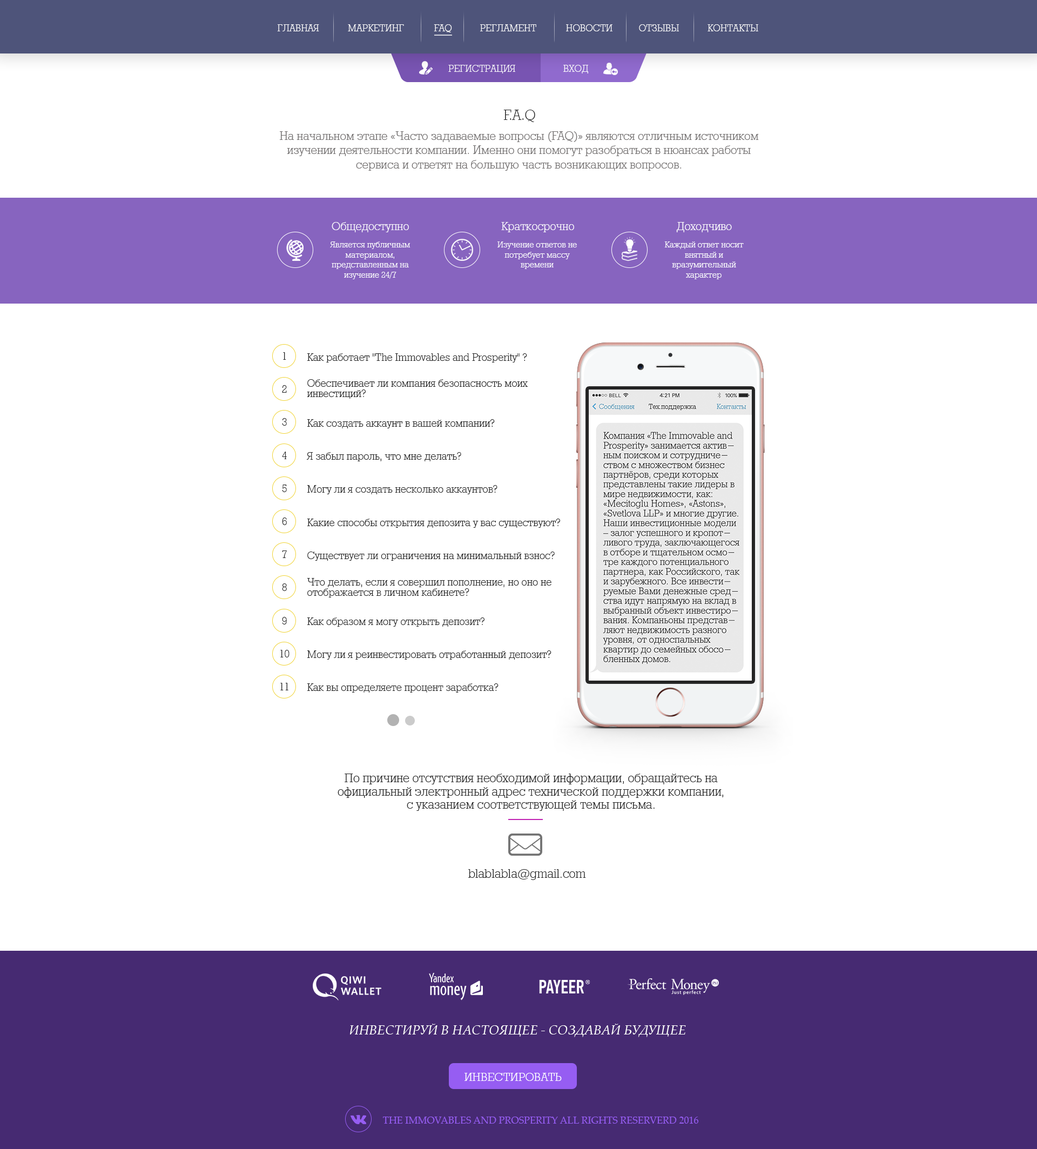
<style>
.page{position:relative;width:1037px;height:1149px;background:#ffffff}
.page>*{position:absolute;margin:0}
.t1{font:10.8px "Rodeo95";color:#ffffff;text-transform:uppercase}
.t2{font:16.2px "Rodeo95";color:#282828}
.t3{font:13.5px/14.3px "Rodeo95";color:#726f6f}
.t4{font:13px "Rodeo95";color:#ffffff}
.t5{font:9.7px/10px "Rodeo95";color:#ffffff}
.t6{font:11.9px "Rodeo95";color:#252525}
.t7{font:14px/13.2px "Rodeo95";color:#252525}
.t8{font:14px "Rodeo95";color:#252525}
.t9{font:13px "PalatinoLinotype-Italic";color:#ffffff;text-transform:uppercase}
.t10{font:13px "Rodeo95";color:#ffffff;text-transform:uppercase}
.t11{font:9.7px "PalatinoLinotype-Roman";color:#965df2;text-transform:uppercase}
</style>
<div class="page">
<p class="t1" style="left:277px;top:24px;width:42px;height:7px">Главная</p>
<p class="t1" style="left:348px;top:24px;width:56px;height:7px">МАРКЕТИНГ</p>
<p class="t1" style="left:434px;top:24px;width:18px;height:8px">FAQ</p>
<p class="t1" style="left:480px;top:24px;width:57px;height:7px">РЕГЛАМЕНТ</p>
<p class="t1" style="left:566px;top:24px;width:47px;height:7px">НОВОСТИ</p>
<p class="t1" style="left:639px;top:24px;width:40px;height:7px">Отзывы</p>
<p class="t1" style="left:708px;top:24px;width:51px;height:7px">КОНТАКТЫ</p>
<p class="t1" style="left:448px;top:65px;width:68px;height:8px">РЕГИСТРАЦИЯ</p>
<p class="t1" style="left:564px;top:65px;width:24px;height:8px">ВХОД</p>
<p class="t2" style="left:504px;top:110px;width:31px;height:12px">F.A.Q</p>
<p class="t3" style="left:280px;top:131px;width:479px;height:40px;text-align:center">На начальном этапе «Часто задаваемые вопросы (FAQ)» являются отличным источником изучении деятельности компании. Именно они помогут разобраться в нюансах работы сервиса и ответят на большую часть возникающих вопросов.</p>
<p class="t4" style="left:332px;top:222px;width:77px;height:10px">Общедоступно</p>
<p class="t4" style="left:501px;top:222px;width:73px;height:10px">Краткосрочно</p>
<p class="t4" style="left:677px;top:222px;width:55px;height:10px">Доходчиво</p>
<p class="t5" style="left:330px;top:242px;width:81px;height:37px;text-align:center">Является публичным материалом, <br>представленным на изучение 24/7</p>
<p class="t5" style="left:498px;top:242px;width:79px;height:27px;text-align:center">Изучение ответов не потребует массу <br>времени</p>
<p class="t5" style="left:665px;top:242px;width:79px;height:37px;text-align:center">Каждый ответ носит внятный и <br>вразумительный <br>характер</p>
<p class="t6" style="left:283px;top:352px;width:3px;height:8px">1</p>
<p class="t6" style="left:307px;top:353px;width:220px;height:10px">Как работает "The Immovables and Prosperity" ?</p>
<p class="t6" style="left:282px;top:385px;width:5px;height:8px">2</p>
<p class="t6" style="left:307px;top:379px;width:221px;height:20px">Обеспечивает ли компания безопасность моих           инвестиций?</p>
<p class="t6" style="left:282px;top:418px;width:5px;height:8px">3</p>
<p class="t6" style="left:307px;top:419px;width:188px;height:10px">Как создать аккаунт в вашей компании?</p>
<p class="t6" style="left:282px;top:452px;width:5px;height:7px">4</p>
<p class="t6" style="left:307px;top:452px;width:154px;height:9px">Я забыл пароль, что мне делать?</p>
<p class="t6" style="left:282px;top:485px;width:5px;height:7px">5</p>
<p class="t6" style="left:307px;top:485px;width:191px;height:9px">Могу ли я создать несколько аккаунтов?</p>
<p class="t6" style="left:282px;top:518px;width:5px;height:7px">6</p>
<p class="t6" style="left:307px;top:519px;width:253px;height:9px">Какие способы открытия депозита у вас существуют?</p>
<p class="t6" style="left:282px;top:551px;width:5px;height:7px">7</p>
<p class="t6" style="left:307px;top:552px;width:248px;height:9px">Существует ли ограничения на минимальный взнос?</p>
<p class="t6" style="left:307px;top:578px;width:245px;height:20px">Что делать, если я совершил пополнение, но оно не отображается в личном кабинете?</p>
<p class="t6" style="left:282px;top:584px;width:5px;height:7px">8</p>
<p class="t6" style="left:282px;top:617px;width:5px;height:8px">9</p>
<p class="t6" style="left:307px;top:618px;width:178px;height:9px">Как образом я могу открыть депозит?</p>
<p class="t6" style="left:280px;top:650px;width:10px;height:8px">10</p>
<p class="t6" style="left:307px;top:651px;width:245px;height:9px">Могу ли я реинвестировать отработанный депозит?</p>
<p class="t6" style="left:280px;top:683px;width:9px;height:8px">11</p>
<p class="t6" style="left:307px;top:684px;width:192px;height:9px">Как вы определяете процент заработка?</p>
<p class="t7" style="left:338px;top:774px;width:386px;height:37px;text-align:center">По причине отсутствия необходимой информации, обращайтесь на <br>официальный электронный адрес технической поддержки компании, <br>с указанием соответствующей темы письма.</p>
<p class="t8" style="left:468px;top:869px;width:118px;height:11px">blablabla@gmail.com</p>
<p class="t9" style="left:350px;top:1024px;width:336px;height:13px">Инвестируй в настоящее - создавай будущее</p>
<p class="t10" style="left:465px;top:1073px;width:97px;height:8px">ИНВЕСТИРОВАТЬ</p>
<p class="t11" style="left:383px;top:1117px;width:316px;height:7px">The immovables and prosperity ALL Rights reserverd 2016</p>
</div>
